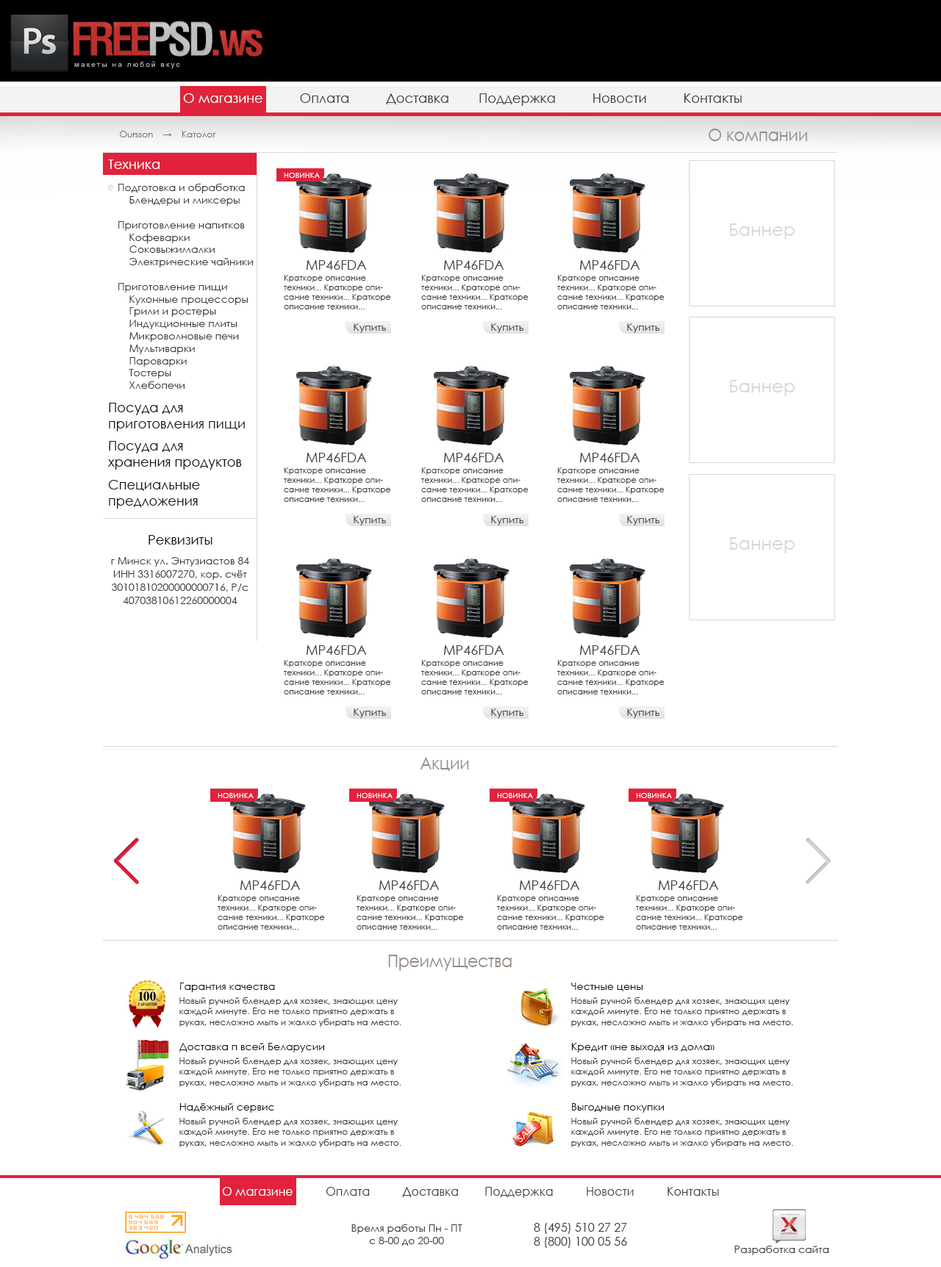
<style>
.page{position:relative;width:941px;height:1267px;background:#ffffff}
.page>*{position:absolute;margin:0}
.t1{font:13.2px "CenturyGothic";color:#434342}
.t2{font:13.2px "CenturyGothic";color:#ffffff}
.t3{font:8.8px "CenturyGothic";color:#7f746c}
.t4{font:17.6px "CenturyGothic";color:#968c85;scale:0.9 1}
.t5{font:7.4px "CenturyGothic";color:#ffffff;text-transform:uppercase}
.t6{font:10.3px "CenturyGothic";color:#423c37}
.t7{font:8.1px "CenturyGothic";color:#423c37}
.t8{font:10.3px "CenturyGothic";color:#434342}
.t9{font:13.2px "CenturyGothic";color:#151515}
.t10{font:10.3px/13.2px "CenturyGothic";color:#423c37}
.t11{font:10.3px "CenturyGothic";color:#151515}
.t12{font:8.8px "CenturyGothic";color:#423c37}
.t13{font:11.8px "CenturyGothic";color:#434342}
.t14{font:11.8px "CenturyGothic";color:#ffffff}
.t15{font:11.8px "CenturyGothic";color:#423c37}
</style>
<div class="page">
<p class="t1" style="left:183px;top:93px;width:559px;height:13px">О магазине          Оплата          Доставка        Поддержка          Новости          Контакты</p>
<p class="t2" style="left:183px;top:93px;width:79px;height:10px">О магазине</p>
<p class="t3" style="left:120px;top:131px;width:96px;height:6px">Oursson    →    Католог</p>
<p class="t4" style="left:709px;top:129px;width:98px;height:12px">О компании</p>
<p class="t2" style="left:108px;top:160px;width:52px;height:9px">Техника</p>
<p class="t5" style="left:284px;top:173px;width:36px;height:5px">Новинка</p>
<p class="t6" style="left:118px;top:184px;width:135px;height:205px">Подготовка и обработка<br>    Блендеры и миксеры<br><br>Приготовление напитков<br>    Кофеварки<br>    Соковыжималки<br>    Электрические чайники<br><br>Приготовление пищи<br>    Кухонные процессоры<br>    Грили и ростеры<br>    Индукционные плиты<br>    Микроволновые печи<br>    Мультиварки<br>    Пароварки<br>    Тостеры<br>    Хлебопечи</p>
<p class="t1" style="left:306px;top:260px;width:61px;height:10px">MP46FDA</p>
<p class="t1" style="left:443px;top:260px;width:61px;height:10px">MP46FDA</p>
<p class="t1" style="left:579px;top:260px;width:61px;height:10px">MP46FDA</p>
<p class="t7" style="left:284px;top:275px;width:107px;height:34px">Краткоре описание техники... Краткоре описание техники... Краткоре описание техники...</p>
<p class="t7" style="left:421px;top:275px;width:108px;height:34px">Краткоре описание техники... Краткоре описание техники... Краткоре описание техники...</p>
<p class="t7" style="left:557px;top:275px;width:108px;height:34px">Краткоре описание техники... Краткоре описание техники... Краткоре описание техники...</p>
<p class="t8" style="left:354px;top:323px;width:32px;height:10px">Купить</p>
<p class="t8" style="left:491px;top:323px;width:32px;height:10px">Купить</p>
<p class="t8" style="left:627px;top:323px;width:32px;height:10px">Купить</p>
<p class="t9" style="left:109px;top:403px;width:136px;height:29px">Посуда для <br>приготовления пищи</p>
<p class="t9" style="left:108px;top:441px;width:134px;height:29px">Посуда для <br>хранения продуктов</p>
<p class="t1" style="left:306px;top:453px;width:61px;height:9px">MP46FDA</p>
<p class="t1" style="left:443px;top:453px;width:61px;height:9px">MP46FDA</p>
<p class="t1" style="left:579px;top:453px;width:61px;height:9px">MP46FDA</p>
<p class="t7" style="left:284px;top:468px;width:107px;height:34px">Краткоре описание техники... Краткоре описание техники... Краткоре описание техники...</p>
<p class="t7" style="left:421px;top:468px;width:108px;height:34px">Краткоре описание техники... Краткоре описание техники... Краткоре описание техники...</p>
<p class="t7" style="left:557px;top:468px;width:108px;height:34px">Краткоре описание техники... Краткоре описание техники... Краткоре описание техники...</p>
<p class="t9" style="left:108px;top:480px;width:92px;height:29px">Специальные <br>предложения</p>
<p class="t8" style="left:354px;top:516px;width:32px;height:10px">Купить</p>
<p class="t8" style="left:491px;top:516px;width:32px;height:10px">Купить</p>
<p class="t8" style="left:627px;top:516px;width:32px;height:10px">Купить</p>
<p class="t9" style="left:148px;top:535px;width:64px;height:10px">Реквизиты</p>
<p class="t10" style="left:111px;top:557px;width:138px;height:47px;text-align:center">г Минск ул. Энтузиастов 84<br>ИНН 3316007270, кор. счёт 30101810200000000716, Р/с 40703810612260000004</p>
<p class="t1" style="left:306px;top:645px;width:61px;height:10px">MP46FDA</p>
<p class="t1" style="left:443px;top:645px;width:61px;height:10px">MP46FDA</p>
<p class="t1" style="left:579px;top:645px;width:61px;height:10px">MP46FDA</p>
<p class="t7" style="left:284px;top:660px;width:107px;height:35px">Краткоре описание техники... Краткоре описание техники... Краткоре описание техники...</p>
<p class="t7" style="left:421px;top:660px;width:108px;height:35px">Краткоре описание техники... Краткоре описание техники... Краткоре описание техники...</p>
<p class="t7" style="left:557px;top:660px;width:108px;height:35px">Краткоре описание техники... Краткоре описание техники... Краткоре описание техники...</p>
<p class="t8" style="left:354px;top:709px;width:32px;height:9px">Купить</p>
<p class="t8" style="left:491px;top:709px;width:32px;height:9px">Купить</p>
<p class="t8" style="left:627px;top:709px;width:32px;height:9px">Купить</p>
<p class="t4" style="left:420px;top:757px;width:49px;height:14px">Акции</p>
<p class="t5" style="left:218px;top:793px;width:36px;height:5px">Новинка</p>
<p class="t5" style="left:357px;top:793px;width:36px;height:5px">Новинка</p>
<p class="t5" style="left:497px;top:793px;width:36px;height:5px">Новинка</p>
<p class="t5" style="left:636px;top:793px;width:36px;height:5px">Новинка</p>
<p class="t1" style="left:240px;top:881px;width:61px;height:9px">MP46FDA</p>
<p class="t1" style="left:379px;top:881px;width:61px;height:9px">MP46FDA</p>
<p class="t1" style="left:519px;top:881px;width:61px;height:9px">MP46FDA</p>
<p class="t1" style="left:658px;top:881px;width:61px;height:9px">MP46FDA</p>
<p class="t7" style="left:218px;top:895px;width:107px;height:35px">Краткоре описание техники... Краткоре описание техники... Краткоре описание техники...</p>
<p class="t7" style="left:357px;top:895px;width:107px;height:35px">Краткоре описание техники... Краткоре описание техники... Краткоре описание техники...</p>
<p class="t7" style="left:497px;top:895px;width:107px;height:35px">Краткоре описание техники... Краткоре описание техники... Краткоре описание техники...</p>
<p class="t7" style="left:636px;top:895px;width:107px;height:35px">Краткоре описание техники... Краткоре описание техники... Краткоре описание техники...</p>
<p class="t4" style="left:388px;top:955px;width:124px;height:16px">Преимущества</p>
<p class="t11" style="left:180px;top:983px;width:95px;height:9px">Гарантия качества</p>
<p class="t11" style="left:571px;top:983px;width:71px;height:9px">Честные цены</p>
<p class="t12" style="left:179px;top:998px;width:222px;height:29px">Новый ручной блендер для хозяек, знающих цену каждой минуте. Его не только приятно держать в руках, несложно мыть и жалко убирать на место.</p>
<p class="t12" style="left:571px;top:998px;width:222px;height:29px">Новый ручной блендер для хозяек, знающих цену каждой минуте. Его не только приятно держать в руках, несложно мыть и жалко убирать на место.</p>
<p class="t11" style="left:179px;top:1043px;width:145px;height:10px">Доставка п всей Беларусии</p>
<p class="t11" style="left:571px;top:1043px;width:144px;height:10px">Кредит «не выходя из дома»</p>
<p class="t12" style="left:179px;top:1058px;width:222px;height:29px">Новый ручной блендер для хозяек, знающих цену каждой минуте. Его не только приятно держать в руках, несложно мыть и жалко убирать на место.</p>
<p class="t12" style="left:571px;top:1058px;width:222px;height:29px">Новый ручной блендер для хозяек, знающих цену каждой минуте. Его не только приятно держать в руках, несложно мыть и жалко убирать на место.</p>
<p class="t11" style="left:179px;top:1103px;width:95px;height:10px">Надёжный сервис</p>
<p class="t11" style="left:572px;top:1103px;width:92px;height:10px">Выгодные покупки</p>
<p class="t12" style="left:179px;top:1118px;width:222px;height:29px">Новый ручной блендер для хозяек, знающих цену каждой минуте. Его не только приятно держать в руках, несложно мыть и жалко убирать на место.</p>
<p class="t12" style="left:571px;top:1118px;width:222px;height:29px">Новый ручной блендер для хозяек, знающих цену каждой минуте. Его не только приятно держать в руках, несложно мыть и жалко убирать на место.</p>
<p class="t13" style="left:222px;top:1187px;width:497px;height:11px">О магазине          Оплата          Доставка        Поддержка          Новости          Контакты</p>
<p class="t14" style="left:222px;top:1187px;width:71px;height:9px">О магазине</p>
<p class="t6" style="left:351px;top:1225px;width:111px;height:21px;text-align:center">Время работы Пн - ПТ<br>с 8-00 до 20-00</p>
<p class="t15" style="left:534px;top:1223px;width:93px;height:25px;text-align:center">8 (495) 510 27 27     <br>8 (800) 100 05 56</p>
<p class="t6" style="left:734px;top:1246px;width:95px;height:10px">Разработка сайта</p>
</div>
